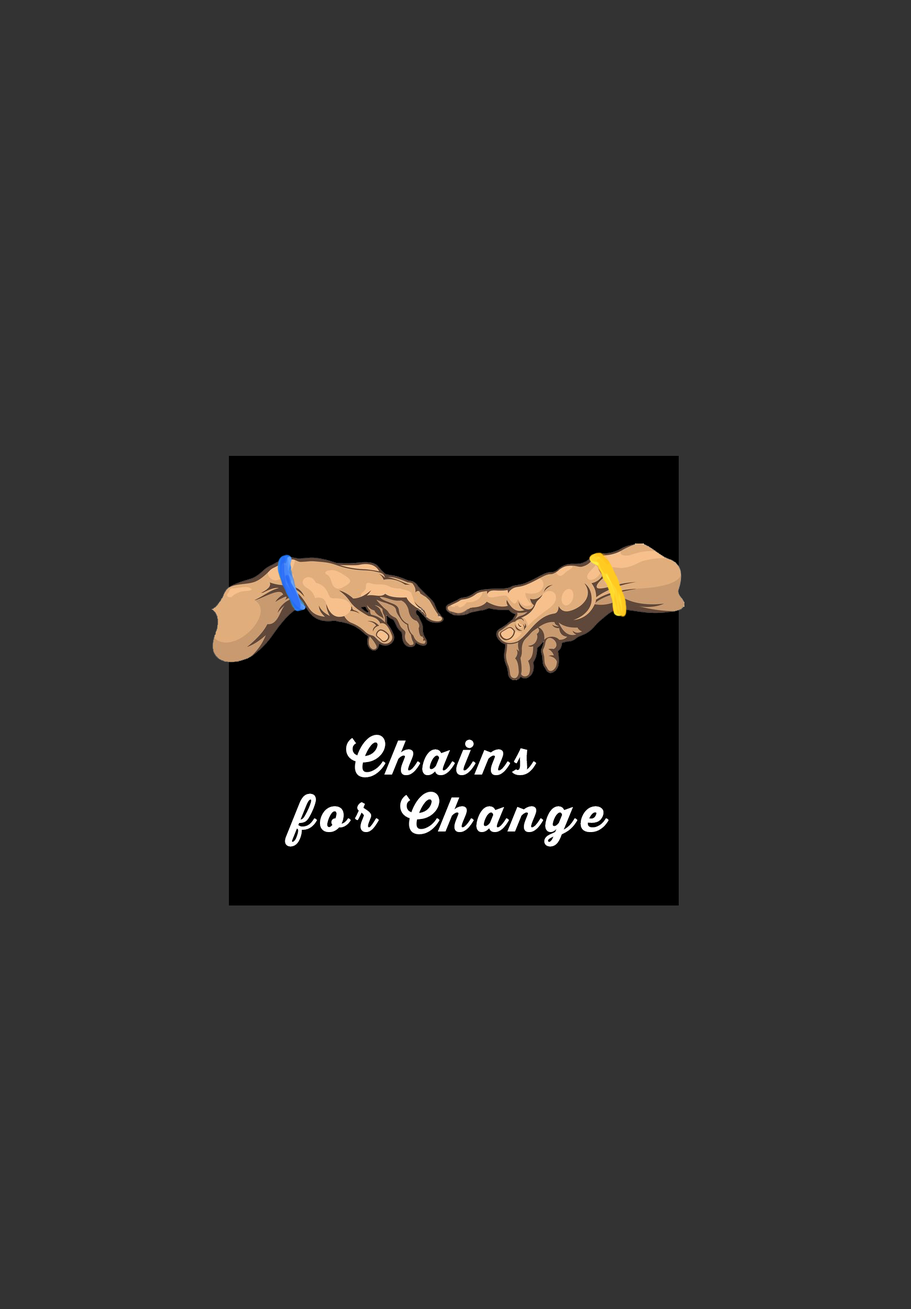
<style>
.page{position:relative;width:911px;height:1309px;background:#333333}
.page>*{position:absolute;margin:0}
.t1{font:47.4px "ThirstyScriptExtraboldDemo";letter-spacing:0.14em;color:#ffffff}
</style>
<div class="page">
<p class="t1" style="left:285px;top:735px;width:324px;height:112px;text-align:center">Chains <br>for Change</p>
</div>
